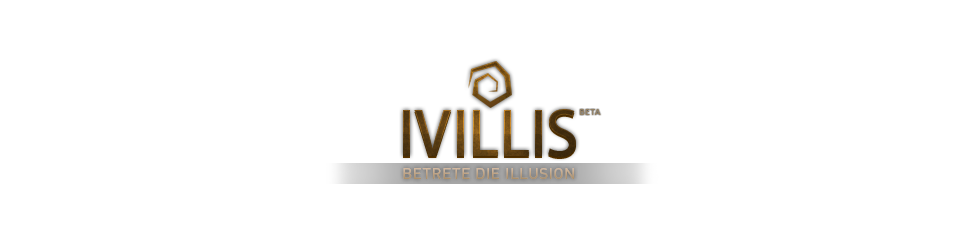
<style>
.page{position:relative;width:980px;height:250px;background:#ffffff}
.page>*{position:absolute;margin:0}
.t1{font:60px "AdobeFanHeitiStd-Bold"}
.t2{font:10px "Calibri";letter-spacing:0.04em;color:#958266}
.t3{font:15.6px "DINPro-Regular";letter-spacing:0.04em}
</style>
<div class="page">
<p class="t1" style="left:403px;top:109px;width:173px;height:48px">IVILLIS</p>
<p class="t2" style="left:579px;top:109px;width:22px;height:6px">BETA</p>
<p class="t3" style="left:403px;top:168px;width:171px;height:11px">BETRETE DIE ILLUSION</p>
</div>
